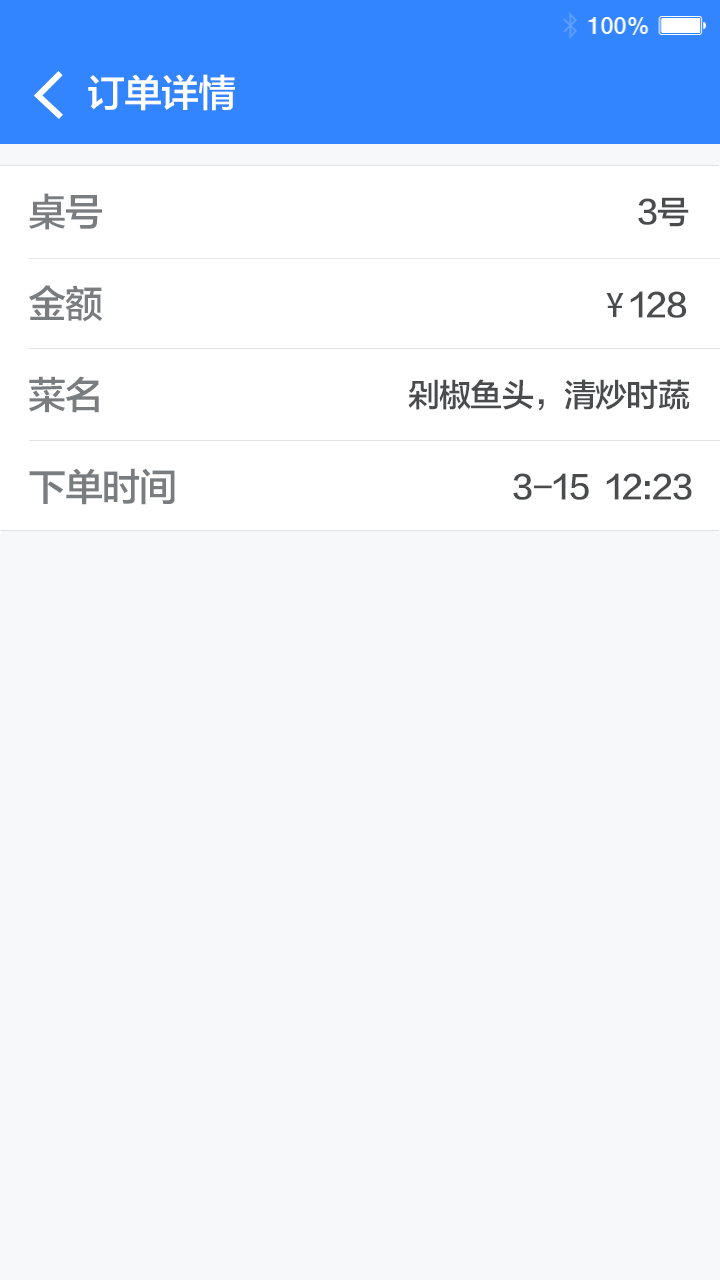
<style>
.page{position:relative;width:720px;height:1280px;background:#f7f8fa}
.page>*{position:absolute;margin:0}
.t1{font:38px "FZLTZHK--GBK1-0";letter-spacing:-0.025em;color:#ffffff}
.t2{font:38px "FZLTZHK--GBK1-0";letter-spacing:-0.025em;color:#7a7d80}
.t3{font:32px "FZLTZHK--GBK1-0";letter-spacing:-0.025em;color:#494b4d}
.t4{font:32px "AdobeHeitiStd-Regular";letter-spacing:-0.025em;color:#494b4d}
</style>
<div class="page">
<p class="t1" style="left:88px;top:74px;width:147px;height:37px">订单详情</p>
<p class="t2" style="left:29px;top:193px;width:73px;height:37px">桌号</p>
<p class="t3" style="left:638px;top:197px;width:51px;height:30px">3号</p>
<p class="t2" style="left:29px;top:285px;width:74px;height:37px">金额</p>
<p class="t4" style="left:606px;top:293px;width:18px;height:24px">¥</p>
<p class="t3" style="left:630px;top:291px;width:56px;height:27px">128</p>
<p class="t2" style="left:29px;top:376px;width:70px;height:37px">菜名</p>
<p class="t3" style="left:408px;top:379px;width:281px;height:32px">剁椒鱼头，清炒时蔬</p>
<p class="t2" style="left:29px;top:468px;width:146px;height:37px">下单时间</p>
<p class="t3" style="left:513px;top:473px;width:179px;height:27px">3-15  12:23</p>
</div>
